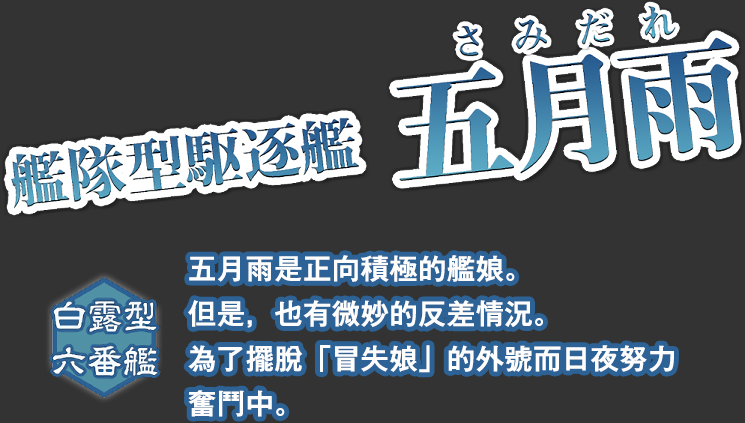
<style>
.page{position:relative;width:745px;height:423px;background:#333333}
.page>*{position:absolute;margin:0}
.t1{font:28px/45px "GothicMB101Pr6N-Medium";color:#fdfdfd;font-weight:bold}
</style>
<div class="page">
<p class="t1" style="left:188px;top:255px;width:486px;height:162px">五月雨是正向積極的艦娘。<br>但是，也有微妙的反差情況。<br>為了擺脫「冒失娘」的外號而日夜努力<br>奮鬥中。</p>
</div>
